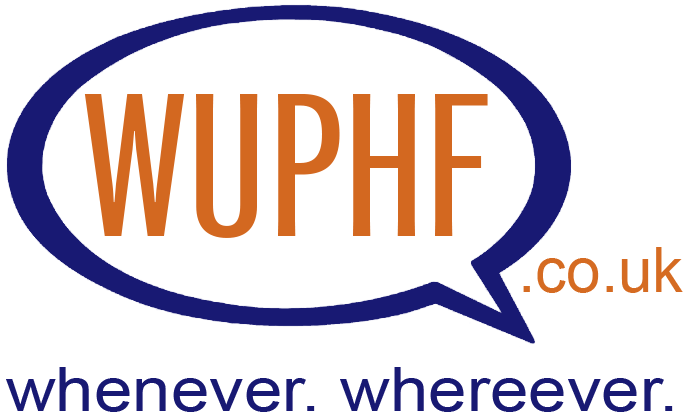
<style>
.page{position:relative;width:700px;height:417px;background:#ffffff}
.page>*{position:absolute;margin:0}
.t1{font:62px "ArialMT";color:#d56b22}
.t2{font:61.3px "ArialMT";color:#181973;scale:1.13 1}
</style>
<div class="page">
<p class="t1" style="left:523px;top:247px;width:160px;height:46px">.co.uk</p>
<p class="t2" style="left:6px;top:367px;width:667px;height:45px">whenever. whereever.</p>
</div>
